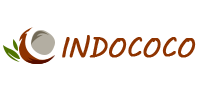
<style>
.page{position:relative;width:200px;height:90px;background:#ffffff}
.page>*{position:absolute;margin:0}
.t1{font:28.2px "MVBoli";color:#8e3300;font-weight:bold;scale:0.9 1}
</style>
<div class="page">
<p class="t1" style="left:62px;top:35px;width:134px;height:23px">INDOCOCO</p>
</div>
